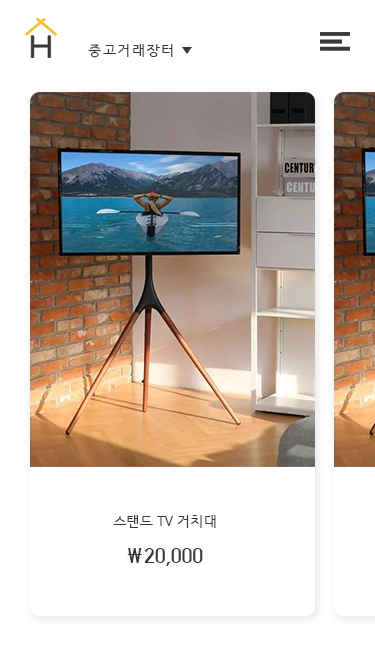
<style>
.page{position:relative;width:375px;height:661px;background:#ffffff}
.page>*{position:absolute;margin:0}
.t1{font:14px "HCRDotum";letter-spacing:0.1em;color:#383838}
.t2{font:14px "HCRDotum";color:#383838}
.t3{font:20px "HCRDotum-Bold";color:#383838}
</style>
<div class="page">
<p class="t1" style="left:88px;top:44px;width:85px;height:14px">중고거래장터</p>
<p class="t2" style="left:113px;top:515px;width:103px;height:13px">스탠드 TV 거치대</p>
<p class="t3" style="left:127px;top:548px;width:76px;height:18px">￦20,000</p>
</div>
